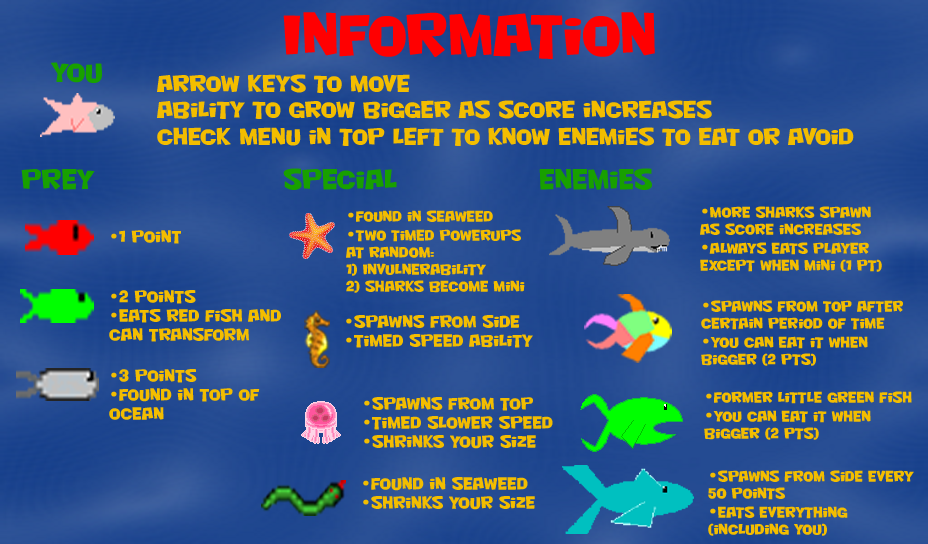
<style>
.page{position:relative;width:928px;height:544px}
.page>*{position:absolute;margin:0}
.t1{font:56.3px "NightclubBTN";color:#ff0001;font-weight:bold;scale:0.97 1}
.t2{font:26px "NightclubBTN";color:#18a000;font-weight:bold}
.t3{font:22px "NightclubBTN";color:#f3bd00;font-weight:bold}
.t4{font:14px "NightclubBTN";color:#f3bd00;font-weight:bold}
.t5{font:16px "NightclubBTN";color:#f3bd00;font-weight:bold}
</style>
<div class="page">
<p class="t1" style="left:283px;top:12px;width:372px;height:47px">Information</p>
<p class="t2" style="left:51px;top:62px;width:51px;height:21px">you</p>
<p class="t3" style="left:157px;top:74px;width:697px;height:72px">arrow keys to move<br>Ability to grow bigger as score increases<br>Check menu in top left to know enemies to eat or avoid</p>
<p class="t2" style="left:21px;top:169px;width:74px;height:21px">prey</p>
<p class="t2" style="left:283px;top:168px;width:114px;height:22px">special</p>
<p class="t2" style="left:539px;top:168px;width:113px;height:22px">Enemies</p>
<p class="t4" style="left:700px;top:206px;width:182px;height:66px"><span class="t5">•</span>More sharks spawn<br>as score increases<br><span class="t5">•</span>Always eats player<br>except when mini (1 pt)</p>
<p class="t4" style="left:346px;top:210px;width:179px;height:83px"><span class="t5">•</span>Found in Seaweed<br><span class="t5">•</span>Two timed powerups <br>at random:<br>1) Invulnerability<br>2) sharks become mini</p>
<p class="t5" style="left:111px;top:230px;width:70px;height:14px">•1 Point</p>
<p class="t5" style="left:109px;top:290px;width:172px;height:52px">•2 Points<br>•eats red fish and <br>can transform</p>
<p class="t4" style="left:701px;top:300px;width:202px;height:66px"><span class="t5">•</span>Spawns from top after<br>certain period of time<br><span class="t5">•</span>You can eat it when<br>bigger (2 pts)</p>
<p class="t5" style="left:346px;top:315px;width:187px;height:33px">•Spawns from side<br>•Timed Speed Ability</p>
<p class="t5" style="left:109px;top:369px;width:151px;height:51px">•3 Points<br>•Found in top of <br>ocean</p>
<p class="t5" style="left:364px;top:397px;width:189px;height:52px">•spawns from top<br>•timed Slower speed<br>•Shrinks your size</p>
<p class="t4" style="left:704px;top:391px;width:208px;height:49px"><span class="t5">•</span>Former little green fish<br><span class="t5">•</span>You can eat it when<br>bigger (2 Pts)</p>
<p class="t4" style="left:708px;top:470px;width:206px;height:66px"><span class="t5">•</span>Spawns from side every <br>50 points<br><span class="t5">•</span>Eats everything<br>(including you)</p>
<p class="t5" style="left:363px;top:477px;width:172px;height:33px">•Found in seaweed<br>•Shrinks your size</p>
</div>
